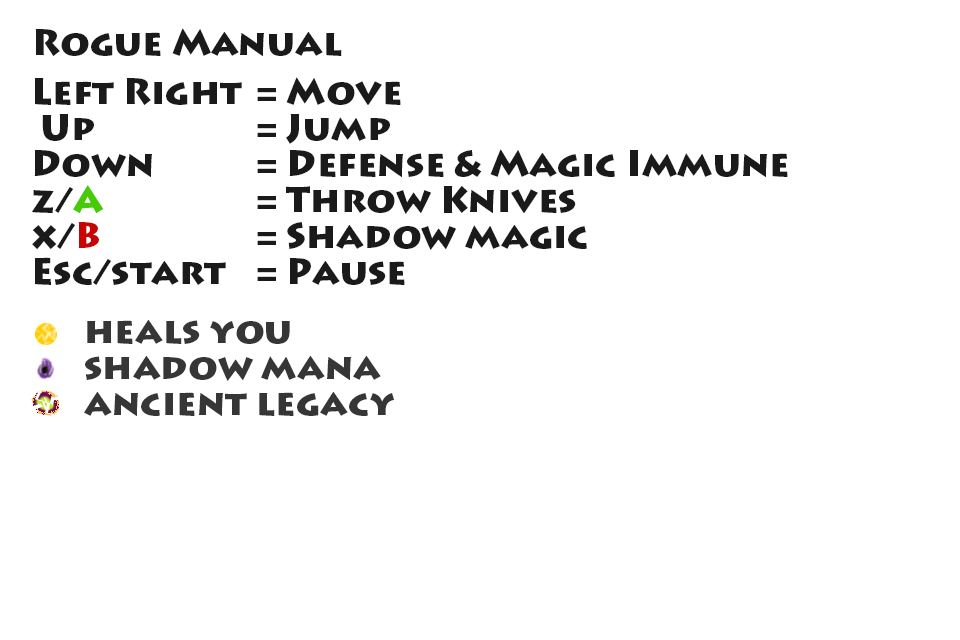
<style>
.page{position:relative;width:960px;height:640px;background:#ffffff}
.page>*{position:absolute;margin:0}
.t1{font:36px "LithosPro-Black";color:#1a1a1a}
.t2{font:36px/36px "LithosPro-Black";color:#1a1a1a}
.t3{font:36px/36px "LithosPro-Black";color:#48ca09}
.t4{font:36px/36px "LithosPro-Black";color:#c80505}
.t5{font:36px/36px "LithosPro-Black";color:#363636}
</style>
<div class="page">
<p class="t1" style="left:35px;top:28px;width:307px;height:29px">Rogue Manual</p>
<p class="t2" style="left:32px;top:77px;width:756px;height:208px">Left Right  = Move<br> Up      = Jump<br>Down    = Defense &amp; Magic Immune<br>z/<span class="t3">A</span>      = Throw Knives<br>x/<span class="t4">B      </span>= Shadow magic<br>Esc/start  = Pause</p>
<p class="t5" style="left:84px;top:320px;width:310px;height:96px">heals you<br>shadow mana<br>ancient legacy</p>
</div>
